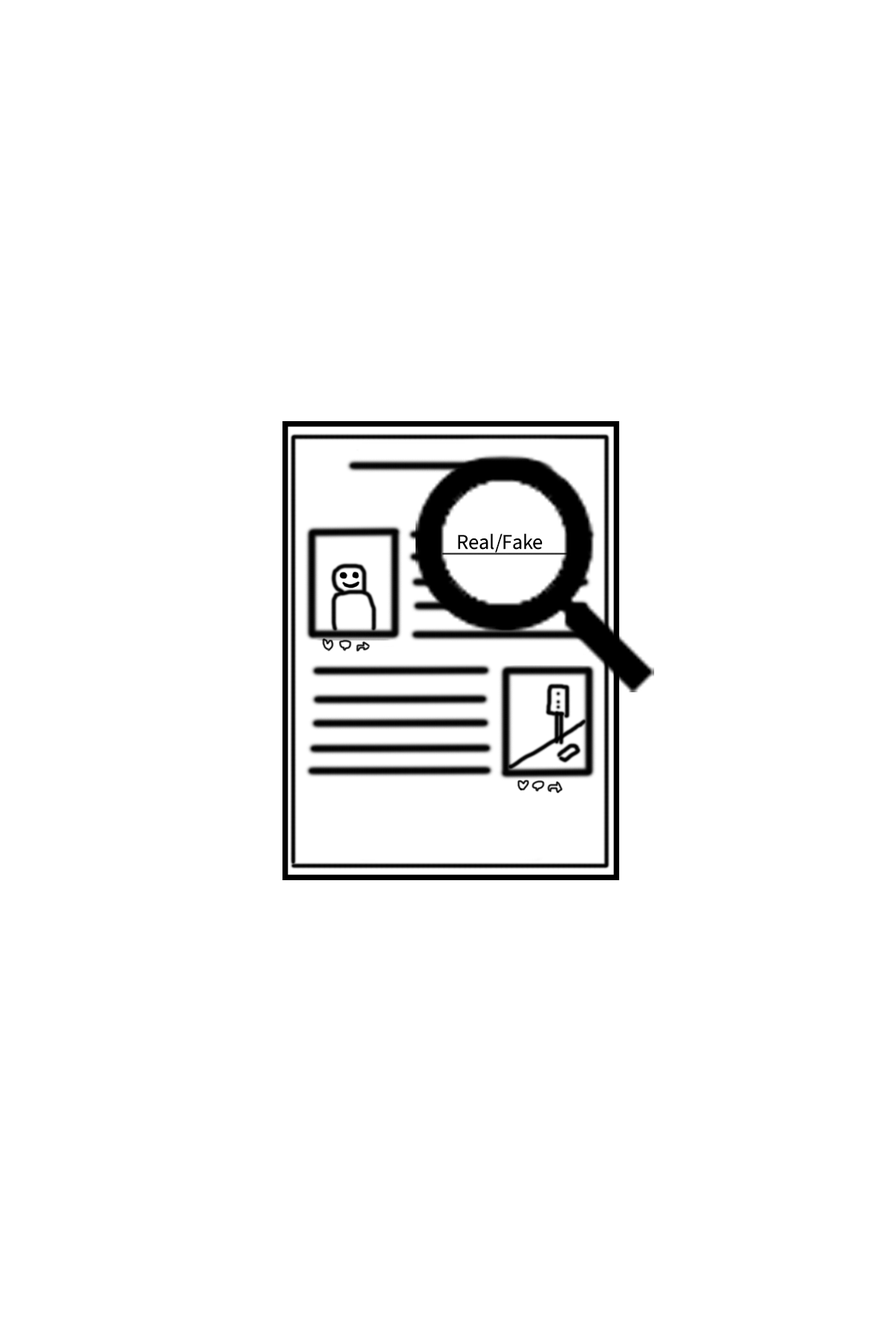
<style>
.page{position:relative;width:892px;height:1337px;background:#ffffff}
.page>*{position:absolute;margin:0}
.t1{font:21.1px "SourceSansRoman-Regular";color:#000000}
</style>
<div class="page">
<p class="t1" style="left:458px;top:533px;width:84px;height:20px">Real/Fake</p>
</div>
